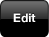
<style>
.page{position:relative;width:49px;height:37px;background:#000000}
.page>*{position:absolute;margin:0}
.t1{font:12px "HelveticaNeue-Bold";color:#ffffff}
</style>
<div class="page">
<p class="t1" style="left:13px;top:13px;width:23px;height:10px">Edit</p>
</div>
